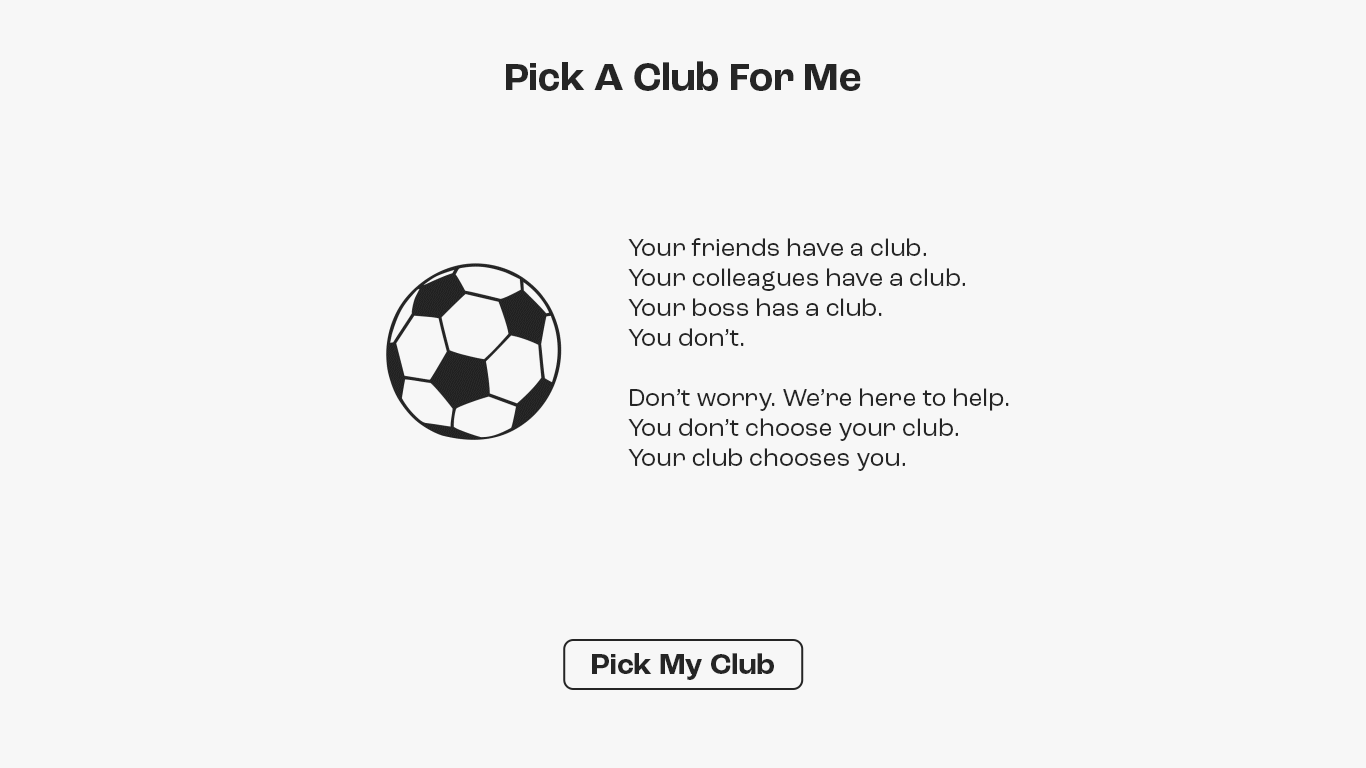
<style>
.page{position:relative;width:1366px;height:768px;background:#f7f7f7}
.page>*{position:absolute;margin:0}
.t1{font:40px "RocGrotesk-Bold";color:#252525}
.t2{font:25px/30px "RocGrotesk-Regular";color:#252525}
.t3{font:30px "RocGrotesk-Bold";color:#252525}
</style>
<div class="page">
<p class="t1" style="left:506px;top:61px;width:355px;height:30px">Pick A Club For Me</p>
<p class="t2" style="left:628px;top:238px;width:381px;height:233px">Your friends have a club.<br>Your colleagues have a club.<br>Your boss has a club.<br>You don’t.<br><br>Don’t worry. We’re here to help.<br>You don’t choose your club.<br>Your club chooses you.</p>
<p class="t3" style="left:592px;top:653px;width:182px;height:27px">Pick My Club</p>
</div>
